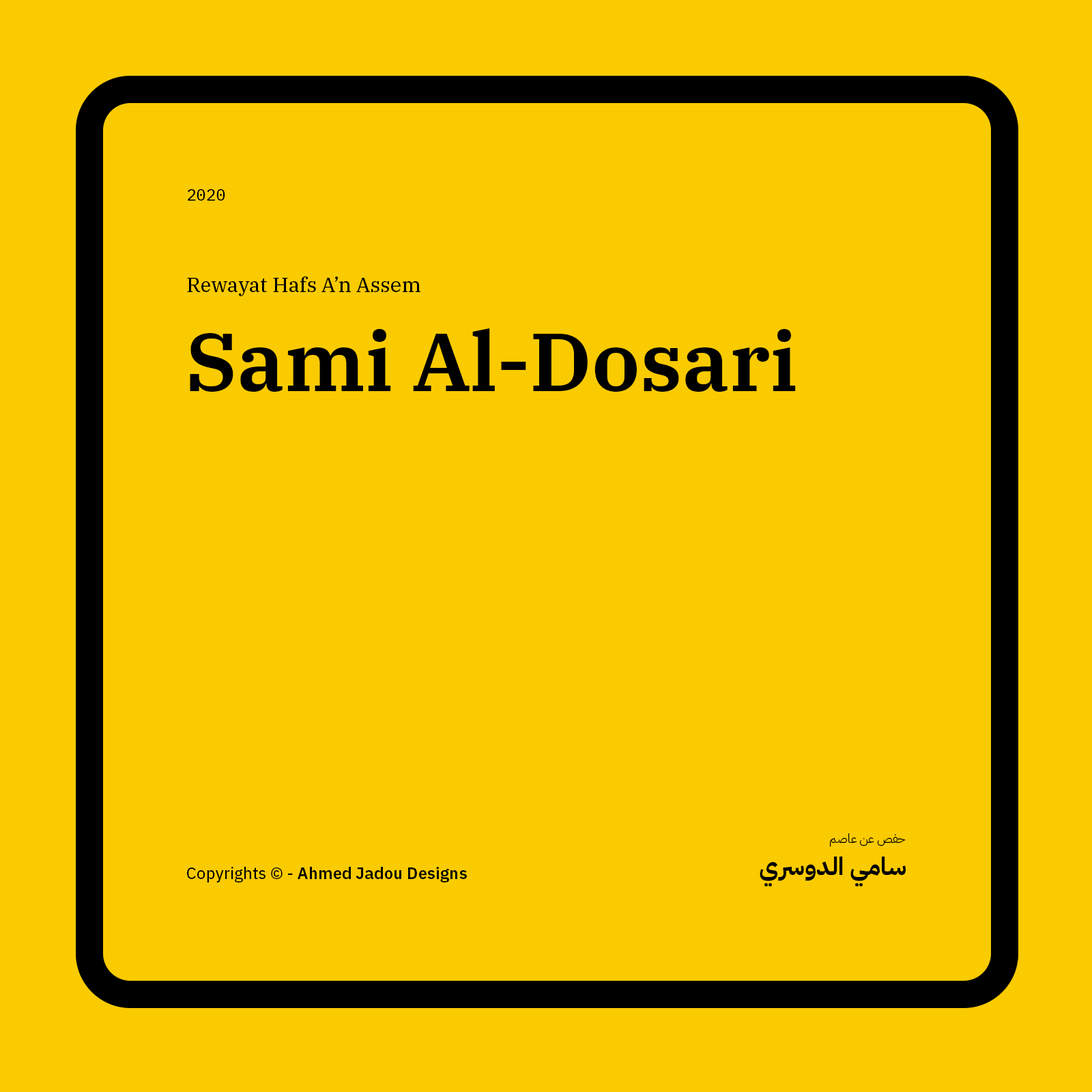
<style>
.page{position:relative;width:1092px;height:1092px;background:#facb00}
.page>*{position:absolute;margin:0}
.t1{font:16.4px "IBMPlexMono-Text";color:#000000}
.t2{font:20.5px "IBMPlexSerif-Text";color:#000000}
.t3{font:81.9px "IBMPlexSerif-SemiBold";color:#000000}
.t4{font:12.3px "IBMPlexArabic-Light";color:#000000}
.t5{font:24.6px "IBMPlexArabic-Bold";color:#000000}
.t6{font:16.4px "IBMPlexSans-SemiBold";color:#000000}
.t7{font:16.4px "IBMPlexSans-Text";color:#000000}
</style>
<div class="page">
<p class="t1" style="left:188px;top:189px;width:37px;height:12px">2020</p>
<p class="t2" style="left:187px;top:276px;width:233px;height:20px">Rewayat Hafs A’n Assem</p>
<p class="t3" style="left:190px;top:328px;width:606px;height:64px">Sami Al-Dosari</p>
<p class="t4" style="left:830px;top:833px;width:76px;height:14px">حفص عن عاصم</p>
<p class="t5" style="left:760px;top:857px;width:146px;height:30px">سامي الدوسري</p>
<p class="t6" style="left:187px;top:867px;width:280px;height:15px"><span class="t7">Copyrights © - </span>Ahmed Jadou Designs</p>
</div>
